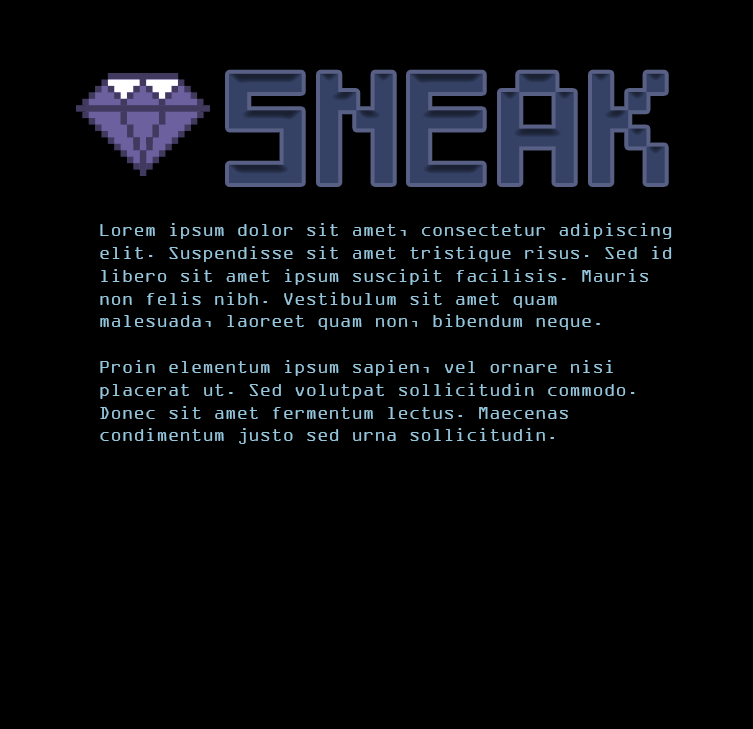
<style>
.page{position:relative;width:753px;height:729px;background:#000000}
.page>*{position:absolute;margin:0}
.t1{font:91px "Pixeled";color:#354266}
.t2{font:19px "OCRAExtended";color:#95c6dc}
</style>
<div class="page">
<p class="t1" style="left:229px;top:73px;width:436px;height:110px">SNEAK</p>
<p class="t2" style="left:100px;top:223px;width:572px;height:221px">Lorem ipsum dolor sit amet, consectetur adipiscing elit. Suspendisse sit amet tristique risus. Sed id libero sit amet ipsum suscipit facilisis. Mauris non felis nibh. Vestibulum sit amet quam malesuada, laoreet quam non, bibendum neque. <br><br>Proin elementum ipsum sapien, vel ornare nisi placerat ut. Sed volutpat sollicitudin commodo. Donec sit amet fermentum lectus. Maecenas condimentum justo sed urna sollicitudin.</p>
</div>
